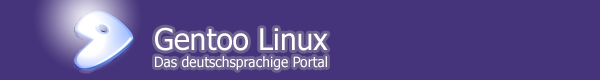
<style>
.page{position:relative;width:600px;height:80px;background:#45347b}
.page>*{position:absolute;margin:0}
.t1{font:14px "Tahoma";color:#ffffff}
.t2{font:29.9px "Tahoma";color:#ffffff}
</style>
<div class="page">
<p class="t1" style="left:155px;top:27px;width:173px;height:43px"><span class="t2">Gentoo Linux<br></span>Das deutschsprachige Portal</p>
</div>
